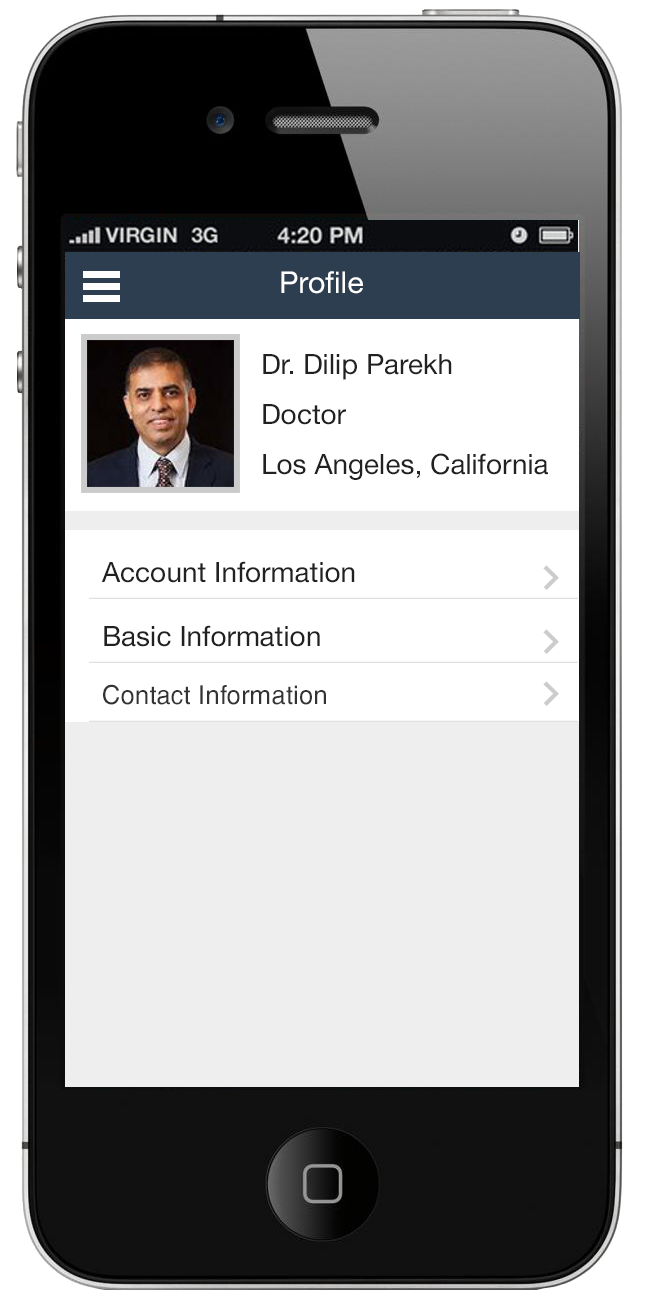
<style>
.page{position:relative;width:648px;height:1300px;background:#ffffff}
.page>*{position:absolute;margin:0}
.t1{font:30px "HelveticaNeue";color:#ffffff}
.t2{font:28px/25px "HelveticaNeue";color:#212121}
.t3{font:28px "HelveticaNeue";color:#212121}
.t4{font:26px "HelveticaCyr-Upright";color:#333333}
</style>
<div class="page">
<p class="t1" style="left:281px;top:271px;width:82px;height:23px">Profile</p>
<p class="t2" style="left:263px;top:354px;width:285px;height:126px">Dr. Dilip Parekh<br><br>Doctor<br><br>Los Angeles, California</p>
<p class="t3" style="left:101px;top:561px;width:254px;height:22px">Account Information</p>
<p class="t3" style="left:104px;top:625px;width:216px;height:22px">Basic Information</p>
<p class="t4" style="left:103px;top:684px;width:223px;height:21px">Contact Information</p>
</div>
